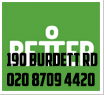
<style>
.page{position:relative;width:104px;height:95px;background:#55a440}
.page>*{position:absolute;margin:0}
.t1{font:18px/20px "AmericanCaptain";color:#020202}
</style>
<div class="page">
<p class="t1" style="left:6px;top:52px;width:92px;height:35px">190 Burdett Rd<br>020 8709 4420</p>
</div>
